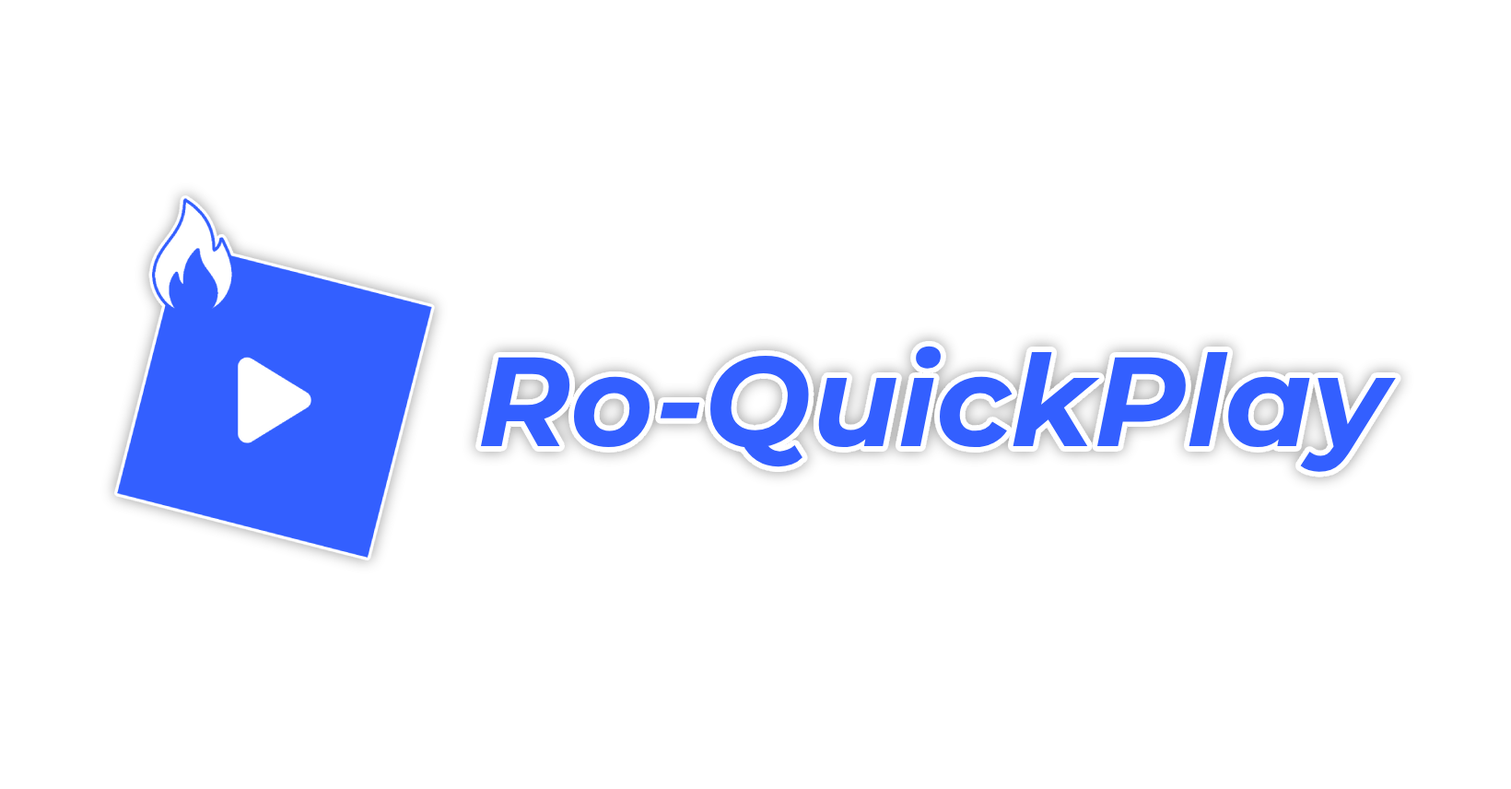
<style>
.page{position:relative;width:1511px;height:789px;background:#ffffff}
.page>*{position:absolute;margin:0}
.t1{font:126.8px "Montserrat-BoldItalic";color:#335fff}
</style>
<div class="page">
<p class="t1" style="left:480px;top:346px;width:916px;height:126px">Ro-QuickPlay</p>
</div>
